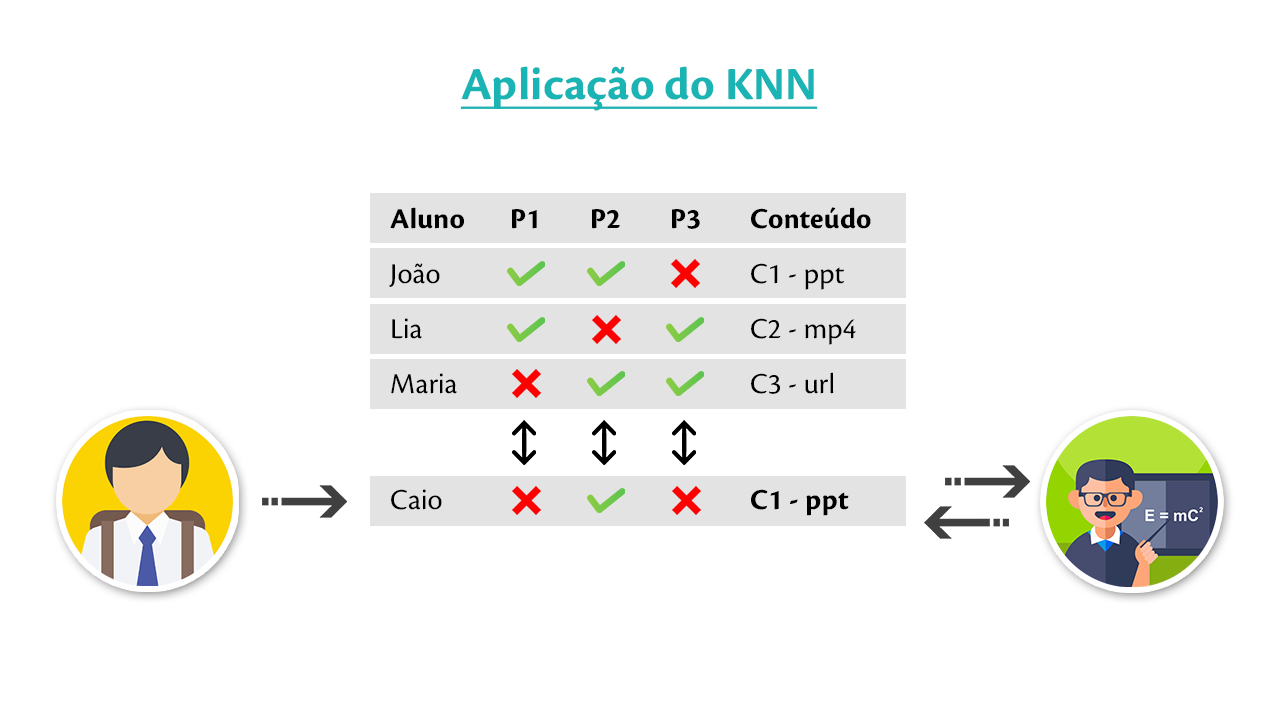
<style>
.page{position:relative;width:1280px;height:720px;background:#ffffff}
.page>*{position:absolute;margin:0}
.t1{font:47.8px "CronosPro-Bold";color:#1ab4b4;text-decoration:underline}
.t2{font:30px/55px "CronosPro-Regular";color:#000000}
.t3{font:30px/55px "CronosPro-Bold";color:#000000}
.t4{font:30px "CronosPro-Bold";color:#000000}
.t5{font:30px "CronosPro-Regular";color:#000000}
</style>
<div class="page">
<p class="t1" style="left:460px;top:66px;width:358px;height:45px">Aplicação do KNN</p>
<p class="t2" style="left:389px;top:207px;width:75px;height:187px"><span class="t3">Aluno<br></span>João<br>Lia<br>Maria</p>
<p class="t4" style="left:512px;top:209px;width:25px;height:20px">P1</p>
<p class="t4" style="left:592px;top:209px;width:28px;height:20px">P2</p>
<p class="t4" style="left:672px;top:209px;width:28px;height:20px">P3</p>
<p class="t2" style="left:751px;top:207px;width:120px;height:187px"><span class="t3">Conteúdo<br></span>C1 - ppt<br>C2 - mp4<br>C3 - url</p>
<p class="t5" style="left:391px;top:489px;width:51px;height:21px">Caio</p>
<p class="t4" style="left:751px;top:489px;width:98px;height:27px">C1 - ppt</p>
</div>
